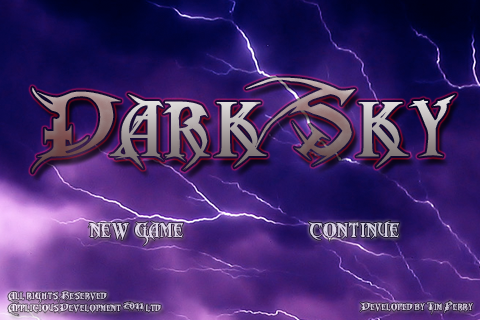
<style>
.page{position:relative;width:480px;height:320px}
.page>*{position:absolute;margin:0}
.t1{font:70px "MetalMacabre"}
.t2{font:18px "MetalMacabre";color:#e0d7e9}
.t3{font:18px "MetalMacabre";color:#d4d0e0}
.t4{font:8px/12px "MetalMacabre";color:#e5dbed}
.t5{font:8px "MetalMacabre";color:#ded5e7}
</style>
<div class="page">
<p class="t1" style="left:31px;top:77px;width:425px;height:96px">Dark Sky</p>
<p class="t2" style="left:88px;top:221px;width:96px;height:25px">new game</p>
<p class="t3" style="left:308px;top:220px;width:92px;height:22px">continue</p>
<p class="t4" style="left:8px;top:291px;width:153px;height:25px">All rights Reserved <br>AppliciousDevelopment 2011 ltd.</p>
<p class="t5" style="left:360px;top:300px;width:113px;height:15px">Developed by Tim Perry</p>
</div>
